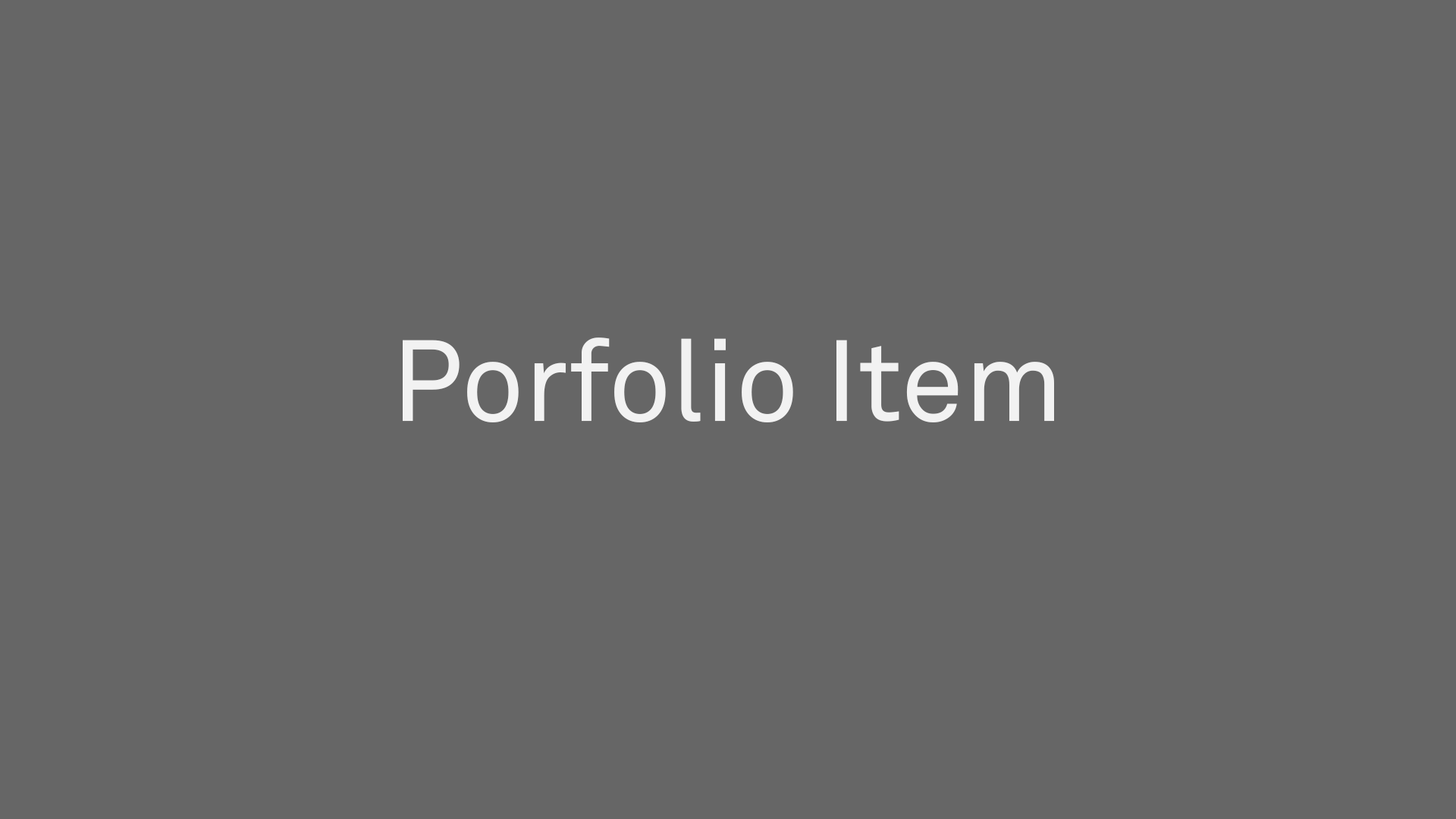
<style>
.page{position:relative;width:1456px;height:819px;background:#666666}
.page>*{position:absolute;margin:0}
.t1{font:113.7px "AkkuratPro-Regular";color:#f2f2f2}
</style>
<div class="page">
<p class="t1" style="left:403px;top:337px;width:651px;height:85px">Porfolio Item</p>
</div>
